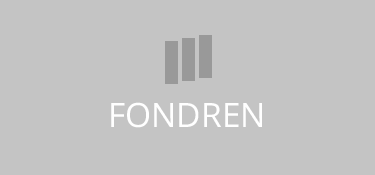
<style>
.page{position:relative;width:375px;height:175px;background:#c4c4c4}
.page>*{position:absolute;margin:0}
.t1{font:33.5px "OpenSans";color:#ffffff}
</style>
<div class="page">
<p class="t1" style="left:111px;top:102px;width:151px;height:26px">FONDREN</p>
</div>
